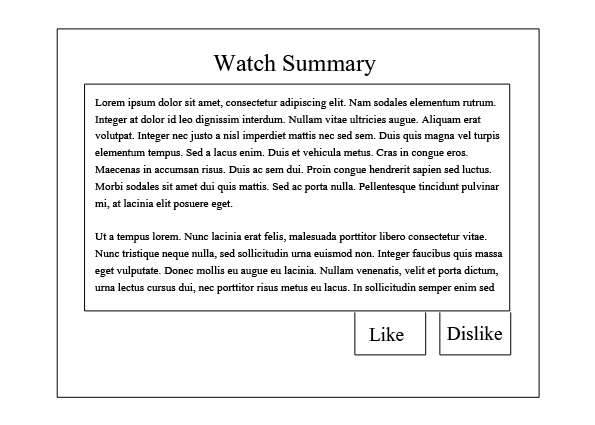
<style>
.page{position:relative;width:595px;height:425px;background:#ffffff}
.page>*{position:absolute;margin:0}
.t1{font:30px "Aparajita";color:#000000}
.t2{font:14px "Aparajita";color:#000000}
.t3{font:24px "Aparajita";color:#000000}
</style>
<div class="page">
<p class="t1" style="left:213px;top:54px;width:163px;height:22px">Watch Summary</p>
<p class="t2" style="left:94px;top:98px;width:409px;height:196px">Lorem ipsum dolor sit amet, consectetur adipiscing elit. Nam sodales elementum rutrum. Integer at dolor id leo dignissim interdum. Nullam vitae ultricies augue. Aliquam erat volutpat. Integer nec justo a nisl imperdiet mattis nec sed sem. Duis quis magna vel turpis elementum tempus. Sed a lacus enim. Duis et vehicula metus. Cras in congue eros. Maecenas in accumsan risus. Duis ac sem dui. Proin congue hendrerit sapien sed luctus. Morbi sodales sit amet dui quis mattis. Sed ac porta nulla. Pellentesque tincidunt pulvinar mi, at lacinia elit posuere eget.<br><br>Ut a tempus lorem. Nunc lacinia erat felis, malesuada porttitor libero consectetur vitae. Nunc tristique neque nulla, sed sollicitudin urna euismod non. Integer faucibus quis massa eget vulputate. Donec mollis eu augue eu lacinia. Nullam venenatis, velit et porta dictum, urna lectus cursus dui, nec porttitor risus metus eu lacus. In sollicitudin semper enim sed fringilla.</p>
<p class="t3" style="left:369px;top:327px;width:35px;height:14px">Like</p>
<p class="t3" style="left:447px;top:326px;width:56px;height:14px">Dislike</p>
</div>
